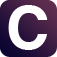
<style>
.page{position:relative;width:57px;height:57px;background:#ffffff}
.page>*{position:absolute;margin:0}
.t1{font:60px "Helvetica-Bold";color:#ffffff}
</style>
<div class="page">
<p class="t1" style="left:8px;top:5px;width:40px;height:45px">C</p>
</div>
